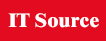
<style>
.page{position:relative;width:106px;height:41px;background:#e30b20}
.page>*{position:absolute;margin:0}
.t1{font:20px "Dutch801BT-ExtraBold";color:#ffffff}
</style>
<div class="page">
<p class="t1" style="left:8px;top:13px;width:91px;height:15px">IT Source</p>
</div>
